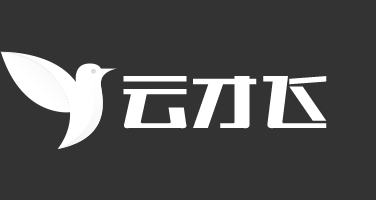
<style>
.page{position:relative;width:376px;height:200px;background:#333333}
.page>*{position:absolute;margin:0}
.t1{font:69.8px "FZCTHJW--GB1-0";color:#ffffff}
</style>
<div class="page">
<p class="t1" style="left:123px;top:76px;width:204px;height:53px">云才飞</p>
</div>
